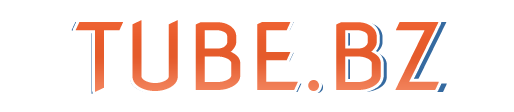
<style>
.page{position:relative;width:514px;height:112px;background:#ffffff}
.page>*{position:absolute;margin:0}
.t1{font:95px "NovaFlat"}
.t2{font:92px "NovaFlat";color:#eb6131}
</style>
<div class="page">
<p class="t1" style="left:71px;top:20px;width:376px;height:74px">TUBE.BZ</p>
<p class="t2" style="left:75px;top:20px;width:364px;height:72px">TUBE.BZ</p>
</div>
